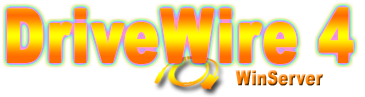
<style>
.page{position:relative;width:365px;height:97px;background:#ffffff}
.page>*{position:absolute;margin:0}
.t1{font:75px "Arial-Black";letter-spacing:0.01em;font-weight:bold;scale:0.7 1}
.t2{font:20.8px "Arial-Black";letter-spacing:0.01em;font-weight:bold;scale:0.7 1}
</style>
<div class="page">
<p class="t1" style="left:7px;top:7px;width:347px;height:57px">DriveWire 4</p>
<p class="t2" style="left:235px;top:70px;width:88px;height:16px">WinServer</p>
</div>
